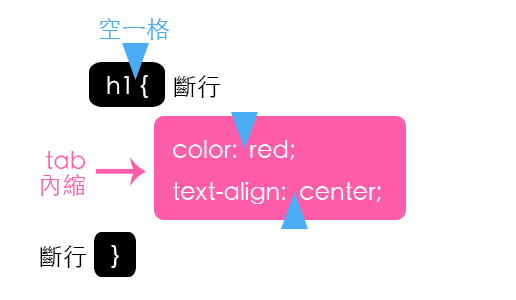
<style>
.page{position:relative;width:516px;height:300px;background:#ffffff}
.page>*{position:absolute;margin:0}
.t1{font:24px "STHeitiTC-Light";color:#4bacf6}
.t2{font:24px "STHeitiTC-Light";color:#ffffff}
.t3{font:24px "STHeitiTC-Light";color:#000000}
.t4{font:24px/24px "STHeitiTC-Light";color:#ff5da9}
</style>
<div class="page">
<p class="t1" style="left:99px;top:18px;width:71px;height:22px">空一格</p>
<p class="t2" style="left:107px;top:75px;width:41px;height:23px">h1 {</p>
<p class="t3" style="left:174px;top:75px;width:47px;height:23px">斷行</p>
<p class="t2" style="left:172px;top:140px;width:209px;height:64px">color:  red;  <br>text-align:  center;</p>
<p class="t4" style="left:41px;top:151px;width:45px;height:45px;text-align:right">tab<br>內縮</p>
<p class="t3" style="left:40px;top:245px;width:47px;height:23px">斷行</p>
<p class="t2" style="left:111px;top:245px;width:8px;height:23px">}</p>
</div>
